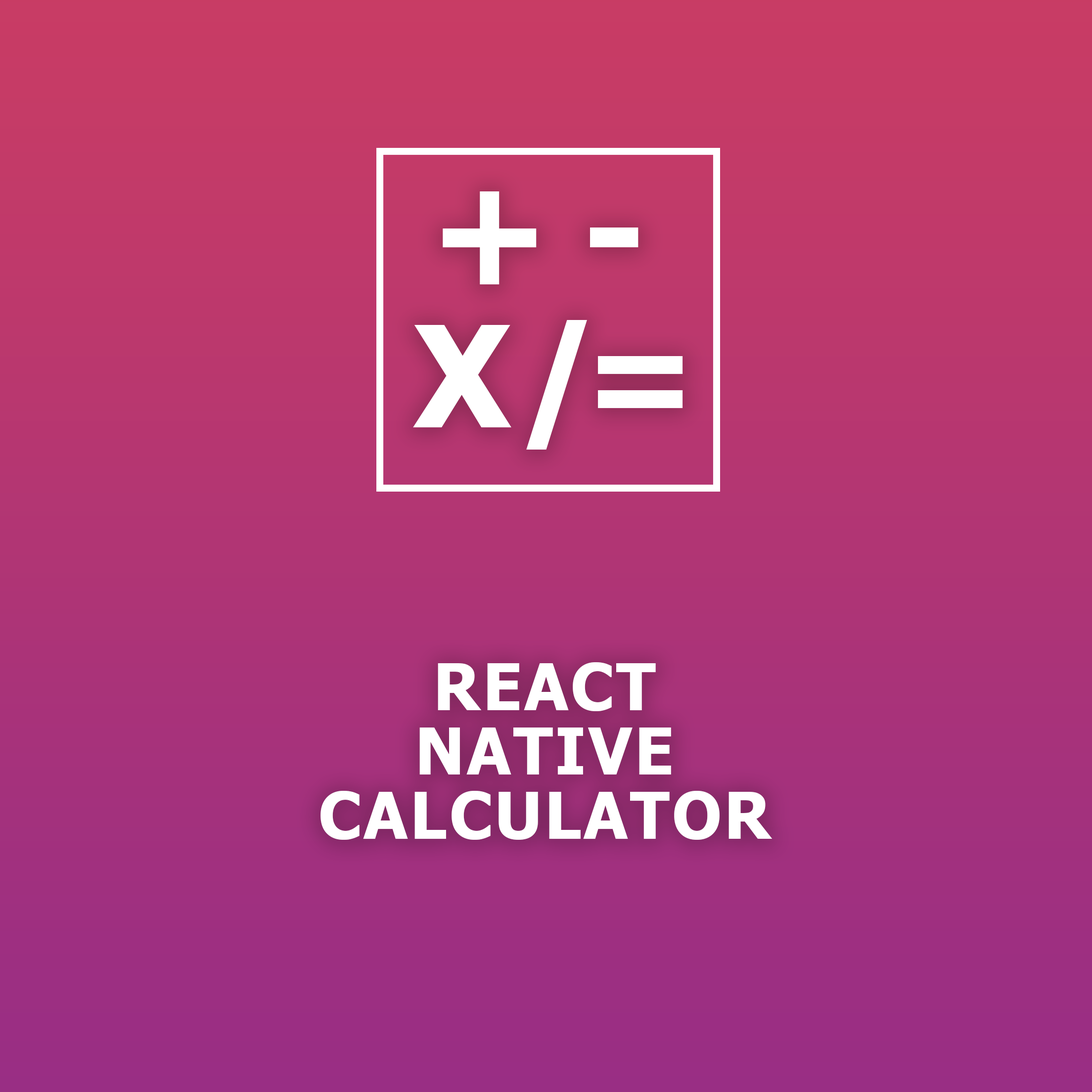
<style>
.page{position:relative;width:1092px;height:1092px}
.page>*{position:absolute;margin:0}
.t1{font:141.1px/142.1px "Tahoma-Bold";letter-spacing:-0.12em;color:#ffffff;text-transform:uppercase}
.t2{font:148.4px/142.1px "Tahoma-Bold";letter-spacing:-0.04em;color:#ffffff;text-transform:uppercase}
.t3{font:64.1px/64.5px "Tahoma-Bold";letter-spacing:0.04em;color:#ffffff;text-transform:uppercase}
</style>
<div class="page">
<p class="t1" style="left:413px;top:191px;width:270px;height:259px;text-align:center"><span class="t2">+ - <br></span>x /=</p>
<p class="t3" style="left:320px;top:662px;width:453px;height:178px;text-align:center">React<br>Native<br>Calculator</p>
</div>
